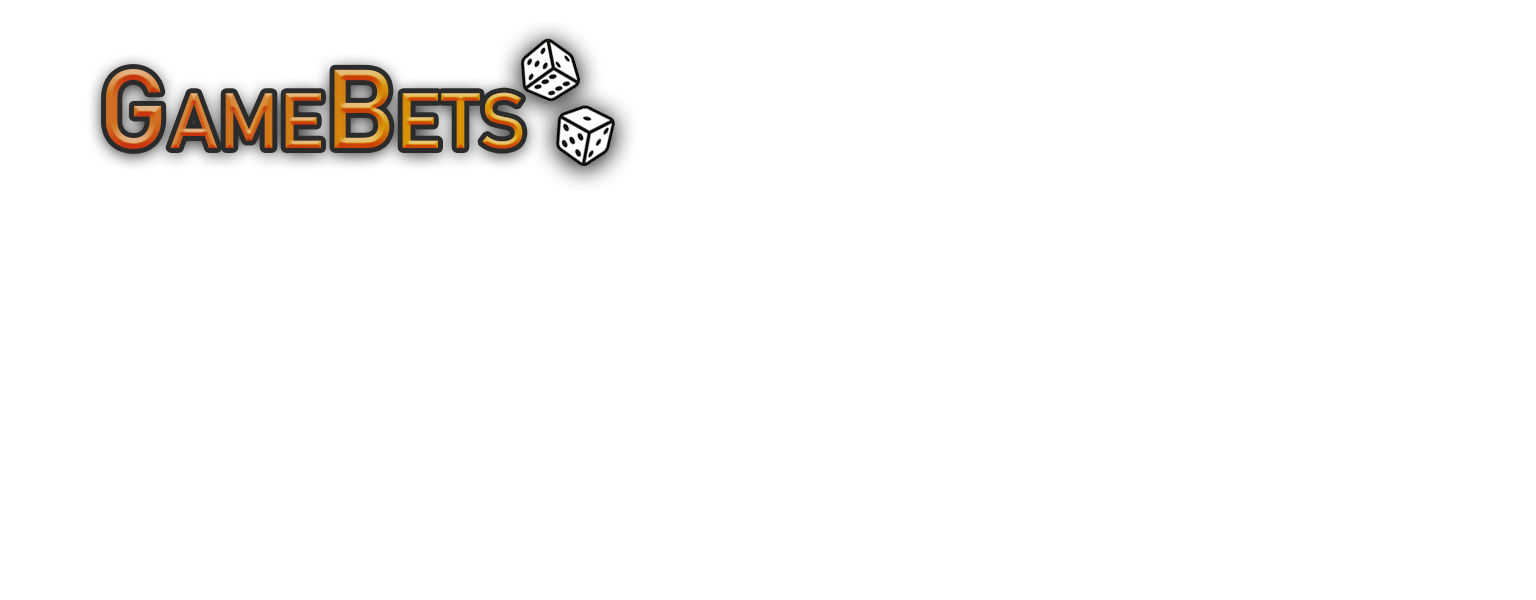
<style>
.page{position:relative;width:1536px;height:600px;background:#ffffff}
.page>*{position:absolute;margin:0}
.t1{font:110px "Bahnschrift";font-variant:small-caps}
</style>
<div class="page">
<p class="t1" style="left:106px;top:69px;width:417px;height:80px">GameBets</p>
</div>
